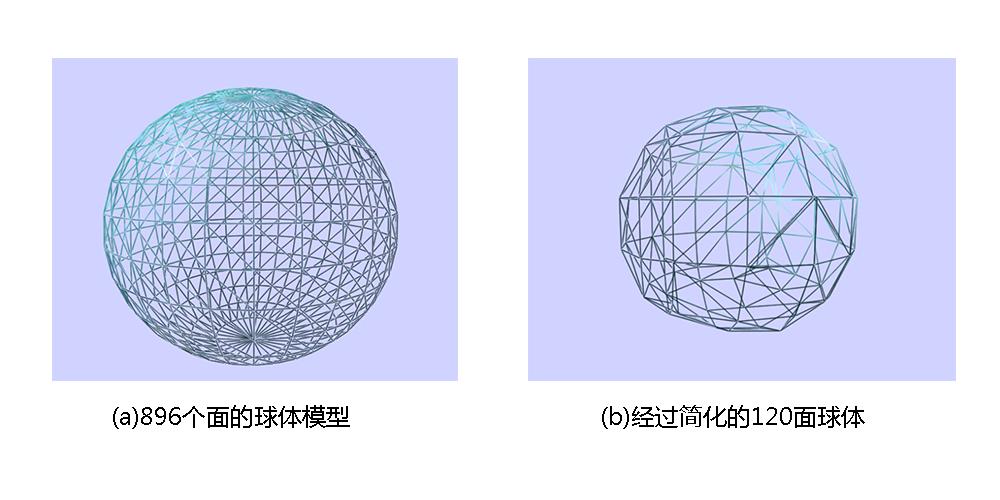
<style>
.page{position:relative;width:1000px;height:500px;background:#ffffff}
.page>*{position:absolute;margin:0}
.t1{font:24px "MicrosoftYaHei";color:#000000}
</style>
<div class="page">
<p class="t1" style="left:113px;top:405px;width:237px;height:24px">(a)896个面的球体模型</p>
<p class="t1" style="left:602px;top:405px;width:263px;height:24px">(b)经过简化的120面球体</p>
</div>
